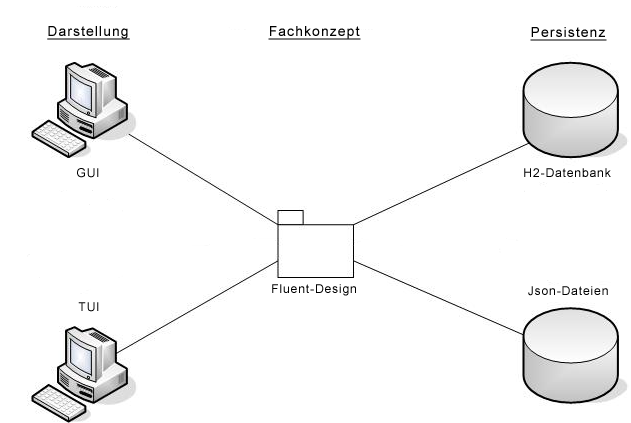
<style>
.page{position:relative;width:631px;height:423px;background:#ffffff}
.page>*{position:absolute;margin:0}
.t1{font:14px "ArialMT";letter-spacing:0.075em;color:#000000;text-decoration:underline}
.t2{font:12px "ArialMT";letter-spacing:0.075em;color:#000000}
</style>
<div class="page">
<p class="t1" style="left:47px;top:26px;width:83px;height:14px">Darstellung</p>
<p class="t1" style="left:268px;top:26px;width:93px;height:14px">Fachkonzept</p>
<p class="t1" style="left:530px;top:27px;width:77px;height:14px">Persistenz</p>
<p class="t2" style="left:77px;top:168px;width:22px;height:10px">GUI</p>
<p class="t2" style="left:524px;top:168px;width:87px;height:9px">H2-Datenbank</p>
<p class="t2" style="left:272px;top:284px;width:84px;height:12px">Fluent-Design</p>
<p class="t2" style="left:528px;top:286px;width:80px;height:10px">Json-Dateien</p>
<p class="t2" style="left:78px;top:302px;width:21px;height:10px">TUI</p>
</div>
